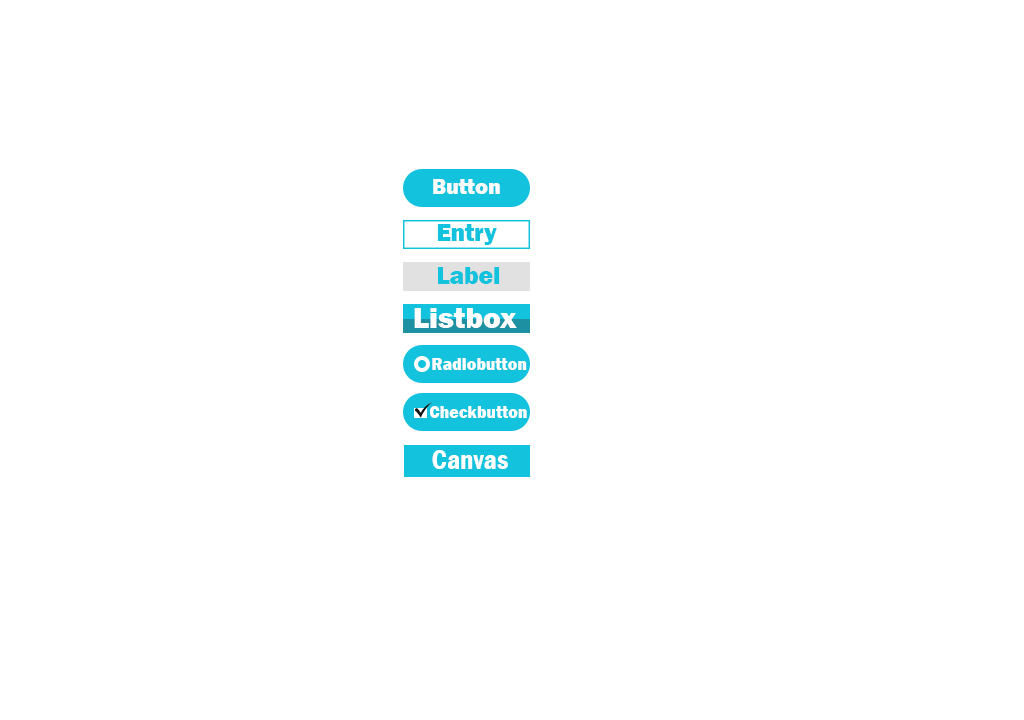
<style>
.page{position:relative;width:1024px;height:720px;background:#ffffff}
.page>*{position:absolute;margin:0}
.t1{font:21.8px "FranklinGothic-Heavy";color:#fbfbfb}
.t2{font:24.6px "FranklinGothic-Heavy";color:#13c2dc}
.t3{font:30px "FranklinGothic-Heavy";color:#ffffff}
.t4{font:16.9px "FranklinGothic-Heavy";color:#ffffff;scale:0.97 1}
.t5{font:28.2px "FranklinGothic-DemiCond";color:#ffffff}
</style>
<div class="page">
<p class="t1" style="left:433px;top:179px;width:67px;height:15px">Button</p>
<p class="t2" style="left:437px;top:224px;width:60px;height:21px">Entry</p>
<p class="t2" style="left:438px;top:267px;width:62px;height:17px">Label</p>
<p class="t3" style="left:414px;top:308px;width:103px;height:20px">Listbox</p>
<p class="t4" style="left:432px;top:358px;width:95px;height:12px">Radiobutton</p>
<p class="t4" style="left:430px;top:406px;width:97px;height:12px">Checkbutton</p>
<p class="t5" style="left:432px;top:450px;width:76px;height:19px">Canvas</p>
</div>
